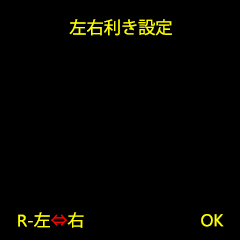
<style>
.page{position:relative;width:240px;height:240px;background:#000000}
.page>*{position:absolute;margin:0}
.t1{font:16.9px "KozGoPr6N-Regular";color:#ffff00}
.t2{font:16.4px "MicrosoftNewTaiLue";color:#ffff00;scale:1.03 1}
.t3{font:16.4px "KozGoPr6N-Regular";color:#ffff00;scale:1.03 1}
.t4{font:16.4px "KozGoPr6N-Regular";color:#ff0000;scale:1.03 1}
.t5{font:16.8px "MicrosoftNewTaiLue";color:#ffff00}
</style>
<div class="page">
<p class="t1" style="left:69px;top:19px;width:103px;height:17px">左右利き設定</p>
<p class="t2" style="left:18px;top:212px;width:66px;height:16px">R-<span class="t3">左</span><span class="t4">⇔</span><span class="t3">右</span></p>
<p class="t5" style="left:201px;top:214px;width:23px;height:13px">OK</p>
</div>
